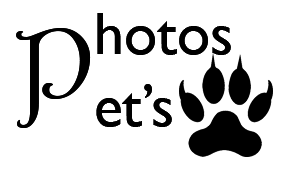
<style>
.page{position:relative;width:289px;height:172px;background:#ffffff}
.page>*{position:absolute;margin:0}
.t1{font:60px "GillSansMT";color:#000000}
.t2{font:118.3px "Harrington";color:#000000;scale:1.06 1}
</style>
<div class="page">
<p class="t1" style="left:96px;top:13px;width:135px;height:114px">hotos<br>et’s</p>
<p class="t1" style="left:96px;top:13px;width:135px;height:114px">hotos<br>et’s</p>
<p class="t2" style="left:16px;top:28px;width:75px;height:100px">P</p>
<p class="t2" style="left:16px;top:28px;width:75px;height:100px">P</p>
</div>
